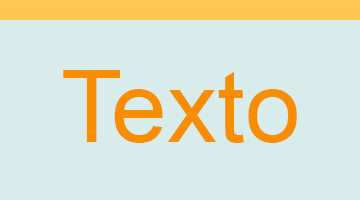
<style>
.page{position:relative;width:360px;height:200px;background:#d8eceb}
.page>*{position:absolute;margin:0}
.t1{font:100px "ArialMT";color:#f98d00}
</style>
<div class="page">
<p class="t1" style="left:63px;top:70px;width:234px;height:73px">Texto</p>
</div>
